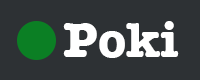
<style>
.page{position:relative;width:200px;height:80px;background:#2d3134}
.page>*{position:absolute;margin:0}
.t1{font:50px "AmericanTypewriter-Bold";color:#ffffff}
</style>
<div class="page">
<p class="t1" style="left:63px;top:21px;width:116px;height:37px">Poki</p>
</div>
